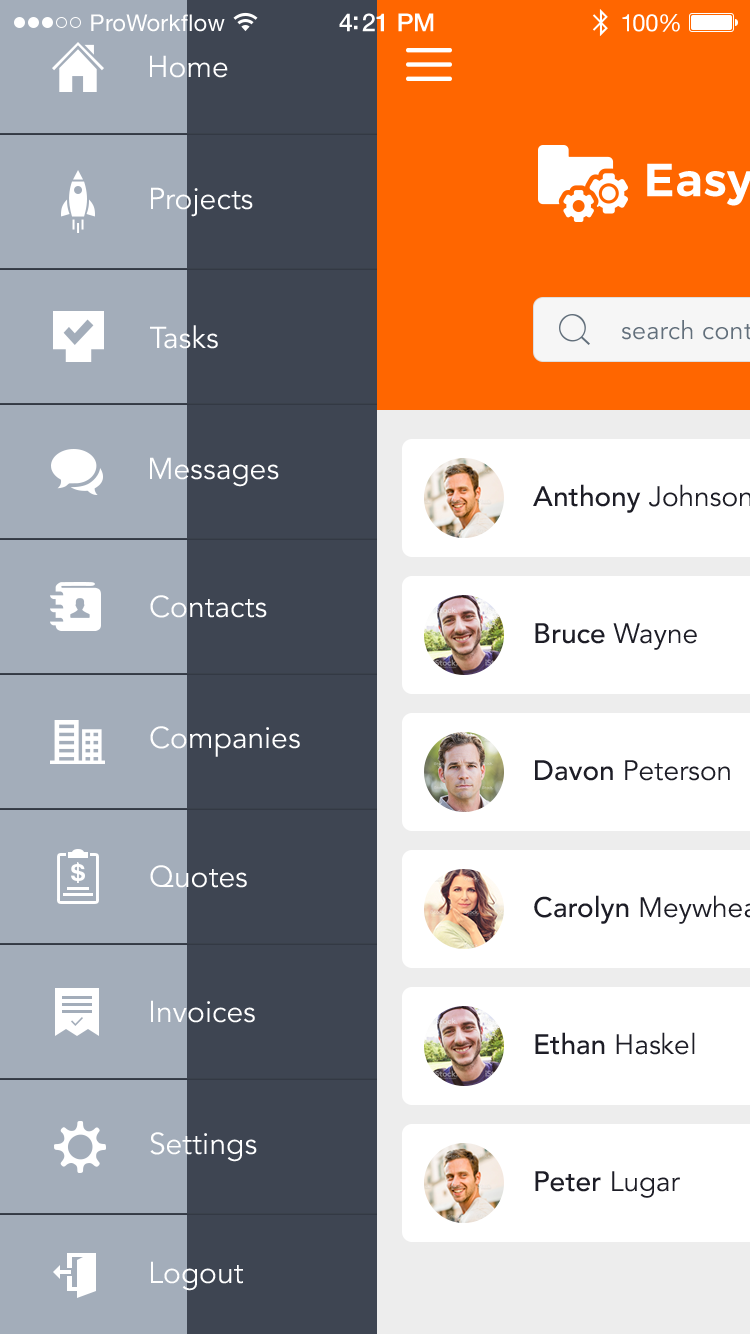
<style>
.page{position:relative;width:750px;height:1334px;background:#3e4552}
.page>*{position:absolute;margin:0}
.t1{font:23px "HelveticaNeue";letter-spacing:0.02em;color:#ffffff}
.t2{font:25px "HelveticaNeue-Medium";letter-spacing:-0.02em;color:#ffffff}
.t3{font:24px "HelveticaNeue";letter-spacing:-0.02em;color:#ffffff}
.t4{font:30px "Avenir-Book";color:#ffffff}
.t5{font:28px "Avenir-Medium";color:#1d1d26}
.t6{font:28px "Avenir-Book";color:#1d1d26}
</style>
<div class="page">
<p class="t1" style="left:91px;top:14px;width:134px;height:18px">ProWorkflow</p>
<p class="t2" style="left:339px;top:13px;width:95px;height:19px">4:21 PM</p>
<p class="t3" style="left:622px;top:14px;width:58px;height:18px">100%</p>
<p class="t4" style="left:150px;top:55px;width:78px;height:23px">Home</p>
<p class="t4" style="left:151px;top:187px;width:102px;height:30px">Projects</p>
<p class="t4" style="left:150px;top:325px;width:68px;height:24px">Tasks</p>
<p class="t4" style="left:150px;top:457px;width:129px;height:30px">Messages</p>
<p class="t5" style="left:533px;top:484px;width:219px;height:29px">Anthony <span class="t6">Johnson</span></p>
<p class="t4" style="left:150px;top:595px;width:117px;height:23px">Contacts</p>
<p class="t5" style="left:535px;top:623px;width:162px;height:27px">Bruce <span class="t6">Wayne</span></p>
<p class="t4" style="left:150px;top:726px;width:150px;height:31px">Companies</p>
<p class="t6" style="left:535px;top:760px;width:195px;height:21px"><span class="t5">Davon </span>Peterson</p>
<p class="t4" style="left:150px;top:865px;width:97px;height:23px">Quotes</p>
<p class="t4" style="left:151px;top:1000px;width:104px;height:23px">Invoices</p>
<p class="t6" style="left:535px;top:1032px;width:160px;height:23px"><span class="t5">Ethan </span>Haskel</p>
<p class="t4" style="left:150px;top:1132px;width:107px;height:30px">Settings</p>
<p class="t5" style="left:535px;top:1171px;width:145px;height:27px">Peter <span class="t6">Lugar</span></p>
<p class="t4" style="left:151px;top:1261px;width:92px;height:30px">Logout</p>
</div>
